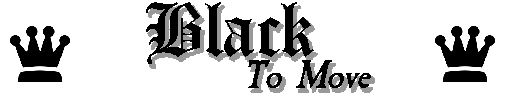
<style>
.page{position:relative;width:512px;height:95px;background:#ffffff}
.page>*{position:absolute;margin:0}
.t1{font:80px "Canterbury-Regular";color:#000000}
.t2{font:42px "CaslonAntique-BoldItalic";color:#000000}
</style>
<div class="page">
<p class="t1" style="left:146px;top:2px;width:168px;height:62px">Black</p>
<p class="t2" style="left:248px;top:60px;width:123px;height:28px">To Move</p>
</div>
